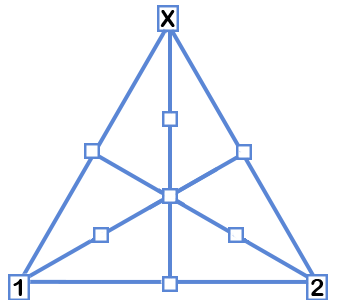
<style>
.page{position:relative;width:340px;height:300px;background:#ffffff}
.page>*{position:absolute;margin:0}
.t1{font:24px "ArialRoundedMTBold";color:#000001}
</style>
<div class="page">
<p class="t1" style="left:160px;top:10px;width:15px;height:17px">X</p>
<p class="t1" style="left:13px;top:279px;width:9px;height:17px">1</p>
<p class="t1" style="left:311px;top:279px;width:13px;height:17px">2</p>
</div>
